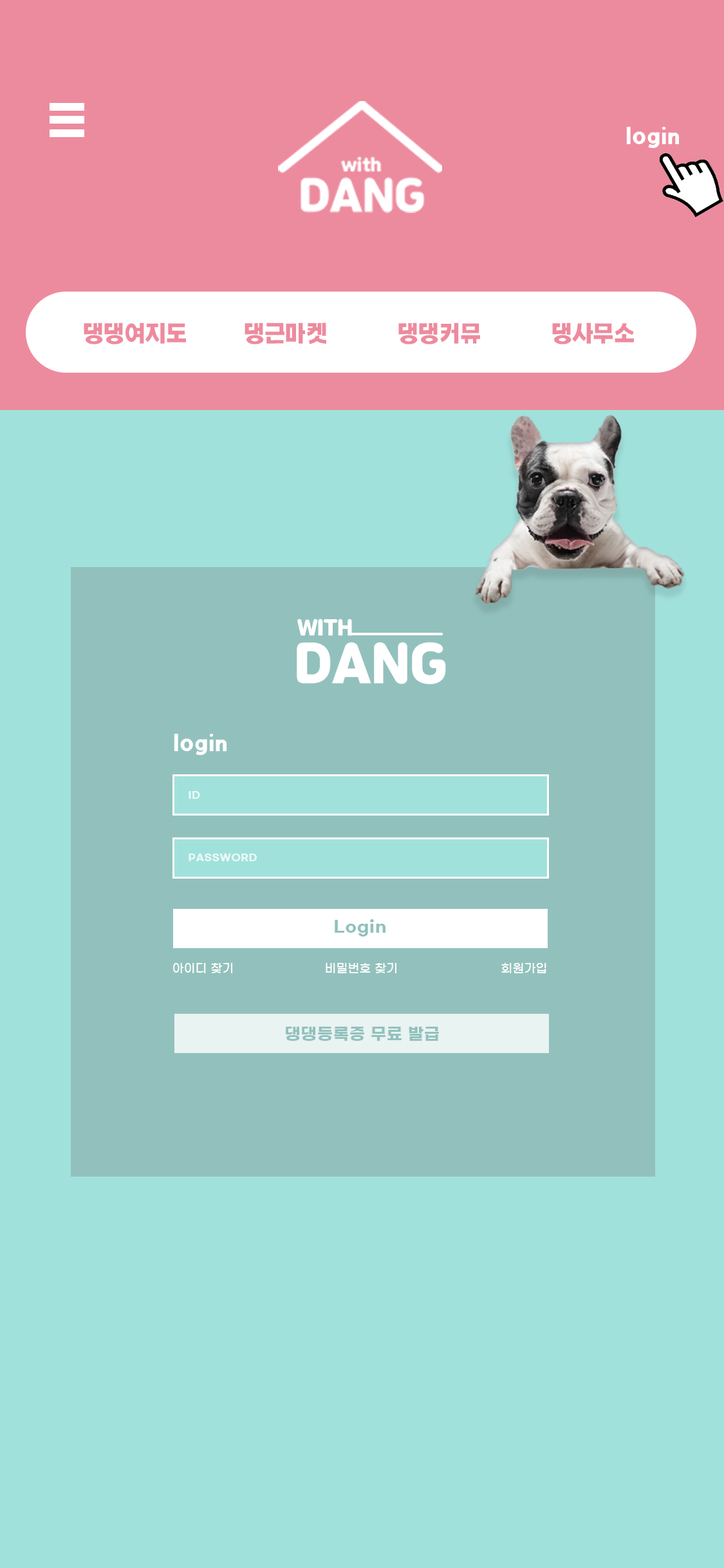
<style>
.page{position:relative;width:724px;height:1568px;background:#a1e1dc}
.page>*{position:absolute;margin:0}
.t1{font:21.2px "KOTRA_BOLD-Bold";color:#ffffff}
.t2{font:21.2px "KOTRA_BOLD-Bold";color:#ed8b9e}
.t3{font:20.3px/22.8px "JalnanOTF";color:#ffffff}
.t4{font:20.3px/22.8px "JalnanOTF";letter-spacing:-0.13em;color:#ffffff}
.t5{font:50.6px/22.8px "JalnanOTF";color:#ffffff}
.t6{font:9.7px/62.4px "GmarketSansTTFBold";letter-spacing:0.04em;color:#ffffff}
.t7{font:16.1px "GmarketSansTTFBold";letter-spacing:0.04em;color:#92c1bd}
.t8{font:11.6px "GmarketSansTTFMedium";letter-spacing:0.04em;color:#ffffff}
</style>
<div class="page">
<p class="t1" style="left:626px;top:127px;width:53px;height:21px">login</p>
<p class="t2" style="left:84px;top:322px;width:102px;height:22px">댕댕여지도</p>
<p class="t2" style="left:245px;top:322px;width:82px;height:22px">댕근마켓</p>
<p class="t2" style="left:398px;top:322px;width:82px;height:22px">댕댕커뮤</p>
<p class="t2" style="left:552px;top:322px;width:82px;height:22px">댕사무소</p>
<p class="t3" style="left:297px;top:619px;width:149px;height:65px"><span class="t4"> </span>WITH<br><span class="t5">DANG</span></p>
<p class="t1" style="left:174px;top:734px;width:53px;height:21px">login</p>
<p class="t6" style="left:189px;top:791px;width:68px;height:70px;opacity:0.8">ID<br>PASSWORD</p>
<p class="t7" style="left:335px;top:919px;width:51px;height:18px">Login</p>
<p class="t8" style="left:173px;top:963px;width:59px;height:10px">아이디 찾기</p>
<p class="t8" style="left:326px;top:963px;width:71px;height:10px">비밀번호 찾기</p>
<p class="t8" style="left:501px;top:963px;width:45px;height:10px">회원가입</p>
<p class="t7" style="left:286px;top:1027px;width:153px;height:14px">댕댕등록증 무료 발급</p>
</div>
